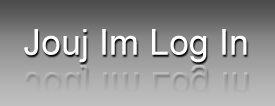
<style>
.page{position:relative;width:275px;height:106px}
.page>*{position:absolute;margin:0}
.t1{font:36px "ArialMT";color:#ffffff}
</style>
<div class="page">
<p class="t1" style="left:24px;top:29px;width:223px;height:34px">Jouj Im Log In</p>
</div>
